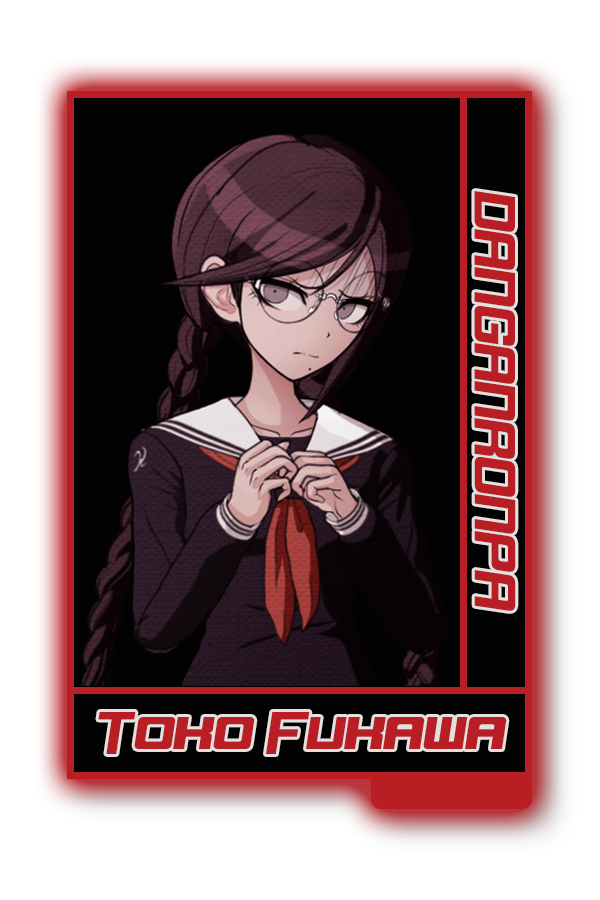
<style>
.page{position:relative;width:600px;height:900px;background:#020202}
.page>*{position:absolute;margin:0}
.t1{font:48.8px "DorBlue";color:#bb2c2e}
.t2{font:50.5px "DorBlue";color:#bb2c2e}
</style>
<div class="page">
<p class="t1" style="left:474px;top:191px;width:42px;height:420px;rotate:90deg">DANGANRONPA</p>
<p class="t2" style="left:98px;top:712px;width:409px;height:42px">Toko Fukawa</p>
</div>
